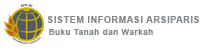
<style>
.page{position:relative;width:200px;height:50px;background:#ffffff}
.page>*{position:absolute;margin:0}
.t1{font:8.9px "Arial-BoldMT";letter-spacing:0.075em;color:#83898c}
.t2{font:8px "Arial-BoldMT";letter-spacing:0.075em;color:#83898c}
</style>
<div class="page">
<p class="t1" style="left:47px;top:16px;width:152px;height:7px">SISTEM INFORMASI ARSIPARIS</p>
<p class="t2" style="left:49px;top:29px;width:104px;height:6px">Buku Tanah dan Warkah</p>
</div>
